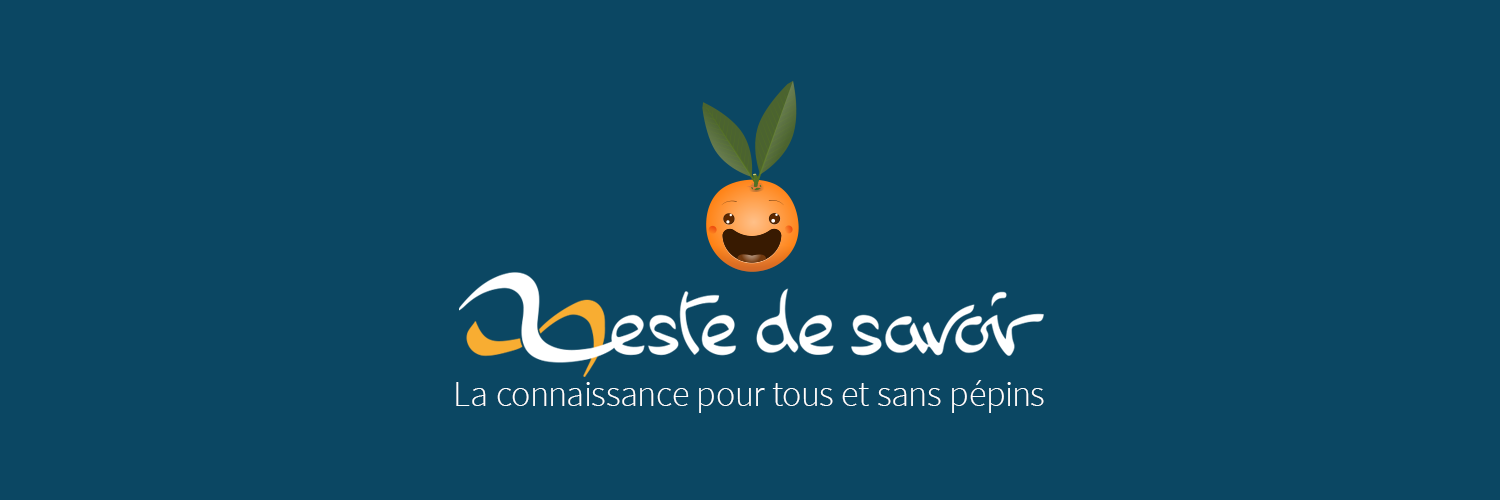
<style>
.page{position:relative;width:1500px;height:500px;background:#0b4763}
.page>*{position:absolute;margin:0}
.t1{font:36.4px "SourceSansPro-Light";color:#ffffff}
</style>
<div class="page">
<p class="t1" style="left:456px;top:380px;width:588px;height:33px">La connaissance pour tous et sans pépins</p>
</div>
